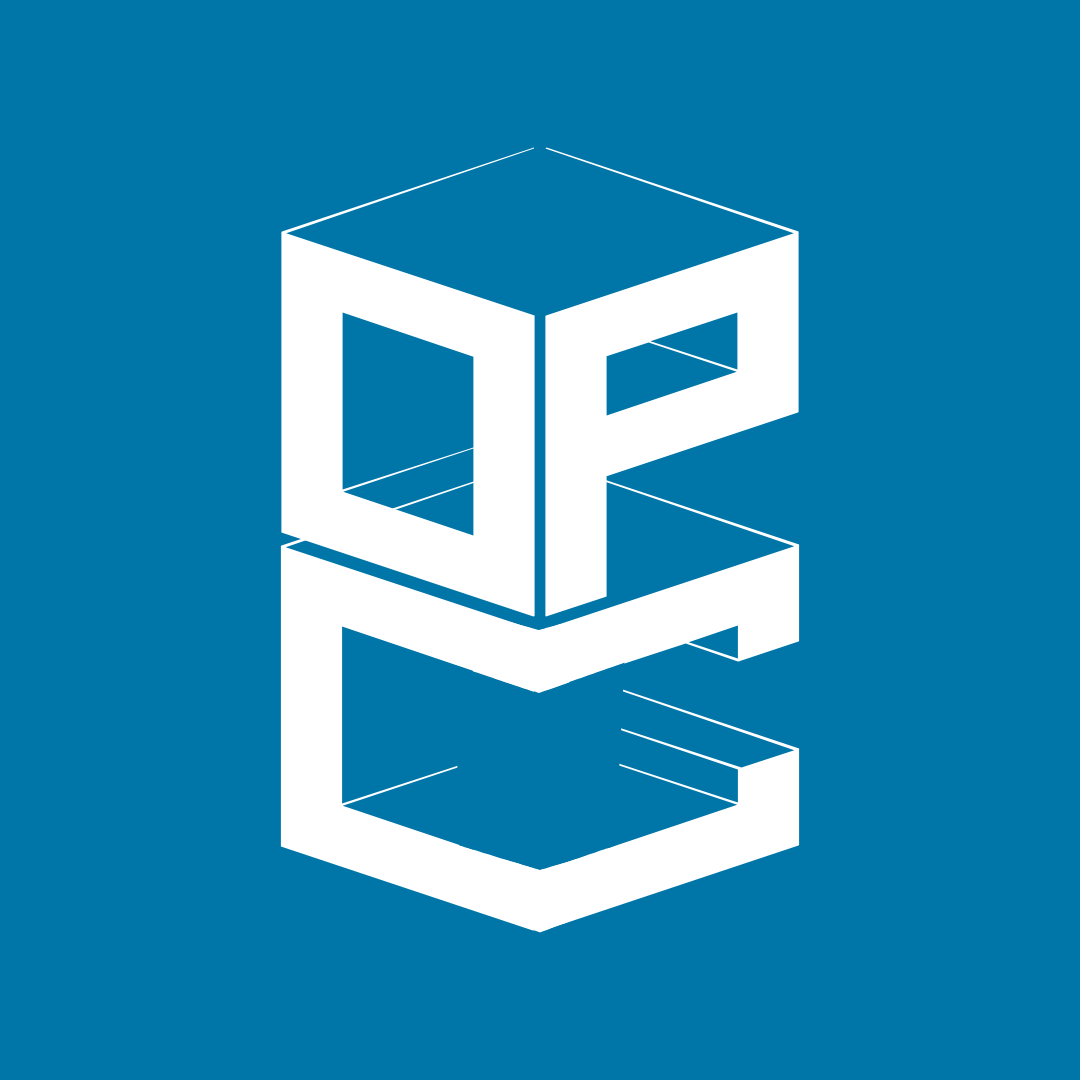
<style>
.page{position:relative;width:1080px;height:1080px;background:#0076a8}
.page>*{position:absolute;margin:0}
.t1{font:600px "sOv_kLoRnG";color:#ffffff}
</style>
<div class="page">
<p class="t1" style="left:281px;top:147px;width:518px;height:470px">oP</p>
<p class="t1" style="left:280px;top:461px;width:255px;height:470px">c</p>
<p class="t1" style="left:545px;top:460px;width:255px;height:470px">C</p>
</div>
